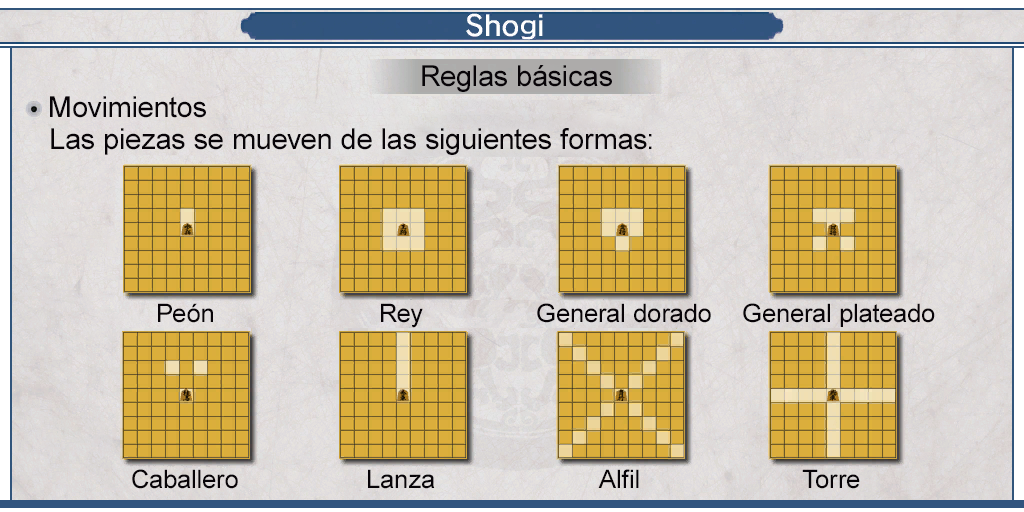
<style>
.page{position:relative;width:1024px;height:512px}
.page>*{position:absolute;margin:0}
.t1{font:29px "ArialMT";color:#080408}
.t2{font:25.6px "ArialMT";color:#080408}
</style>
<div class="page">
<p class="t1" style="left:422px;top:65px;width:190px;height:27px">Reglas básicas</p>
<p class="t1" style="left:50px;top:96px;width:156px;height:22px">Movimientos</p>
<p class="t1" style="left:51px;top:128px;width:601px;height:27px">Las piezas se mueven de las siguientes formas:</p>
<p class="t2" style="left:158px;top:303px;width:55px;height:20px">Peón</p>
<p class="t2" style="left:381px;top:303px;width:42px;height:25px">Rey</p>
<p class="t2" style="left:537px;top:303px;width:174px;height:20px">General dorado</p>
<p class="t2" style="left:743px;top:303px;width:192px;height:24px">General plateado</p>
<p class="t2" style="left:132px;top:469px;width:106px;height:20px">Caballero</p>
<p class="t2" style="left:368px;top:469px;width:67px;height:20px">Lanza</p>
<p class="t2" style="left:598px;top:469px;width:41px;height:19px">Alfil</p>
<p class="t2" style="left:802px;top:469px;width:58px;height:20px">Torre</p>
</div>
